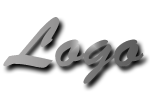
<style>
.page{position:relative;width:150px;height:100px;background:#ffffff}
.page>*{position:absolute;margin:0}
.t1{font:70px "BrushScriptStd"}
</style>
<div class="page">
<p class="t1" style="left:3px;top:17px;width:141px;height:67px">Logo</p>
</div>
